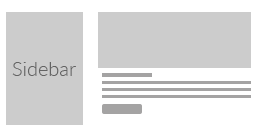
<style>
.page{position:relative;width:256px;height:125px;background:#cccccc}
.page>*{position:absolute;margin:0}
.t1{font:20px "Lato-Light";color:#636363}
</style>
<div class="page">
<p class="t1" style="left:12px;top:62px;width:64px;height:14px">Sidebar</p>
</div>
